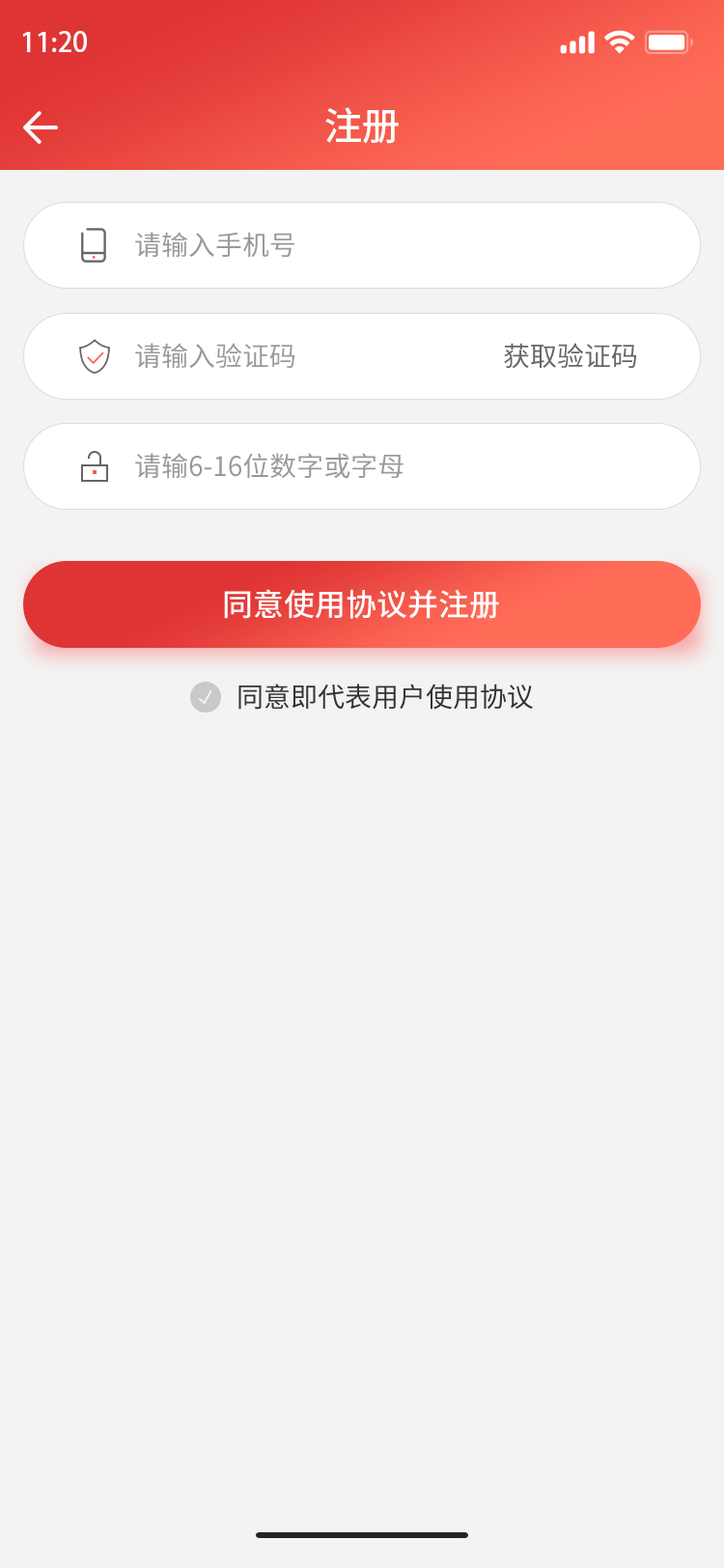
<style>
.page{position:relative;width:724px;height:1568px;background:#f3f3f3}
.page>*{position:absolute;margin:0}
.t1{font:27px "AdobeHeitiStd-Regular";color:#fefefe}
.t2{font:38.6px "SourceHanSansCN-Medium";letter-spacing:-0.02em;color:#fefefe}
.t3{font:27px "SourceHanSansCN-Regular";color:#999999}
.t4{font:27px "SourceHanSansCN-Regular";color:#666666}
.t5{font:30.9px "SourceHanSansCN-Medium";color:#ffffff}
.t6{font:27px "SourceHanSansCN-Regular";color:#333333}
</style>
<div class="page">
<p class="t1" style="left:22px;top:31px;width:65px;height:21px">11:20</p>
<p class="t2" style="left:325px;top:107px;width:74px;height:37px">注册</p>
<p class="t3" style="left:135px;top:232px;width:159px;height:26px">请输入手机号</p>
<p class="t3" style="left:135px;top:343px;width:159px;height:26px">请输入验证码</p>
<p class="t4" style="left:504px;top:343px;width:132px;height:26px">获取验证码</p>
<p class="t3" style="left:135px;top:453px;width:269px;height:26px">请输6-16位数字或字母</p>
<p class="t5" style="left:224px;top:589px;width:275px;height:30px">同意使用协议并注册</p>
<p class="t6" style="left:238px;top:684px;width:295px;height:26px">同意即代表用户使用协议</p>
</div>
